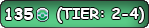
<style>
.page{position:relative;width:149px;height:28px}
.page>*{position:absolute;margin:0}
.t1{font:12px "ComicSansMS-Bold";color:#ffffff}
.t2{font:14.7px "ComicSansMS-Bold";color:#ffffff}
</style>
<div class="page">
<p class="t1" style="left:5px;top:8px;width:28px;height:12px">135</p>
<p class="t2" style="left:57px;top:7px;width:87px;height:16px">(TIER: 2-4)</p>
</div>
